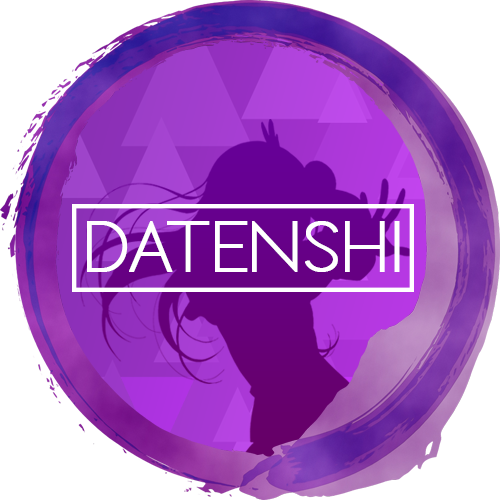
<style>
.page{position:relative;width:500px;height:500px;background:#ffffff}
.page>*{position:absolute;margin:0}
.t1{font:76.5px "LOVES-REG";letter-spacing:-0.025em;color:#ffffff;font-weight:bold}
</style>
<div class="page">
<p class="t1" style="left:87px;top:221px;width:313px;height:51px">DATENSHI</p>
</div>
